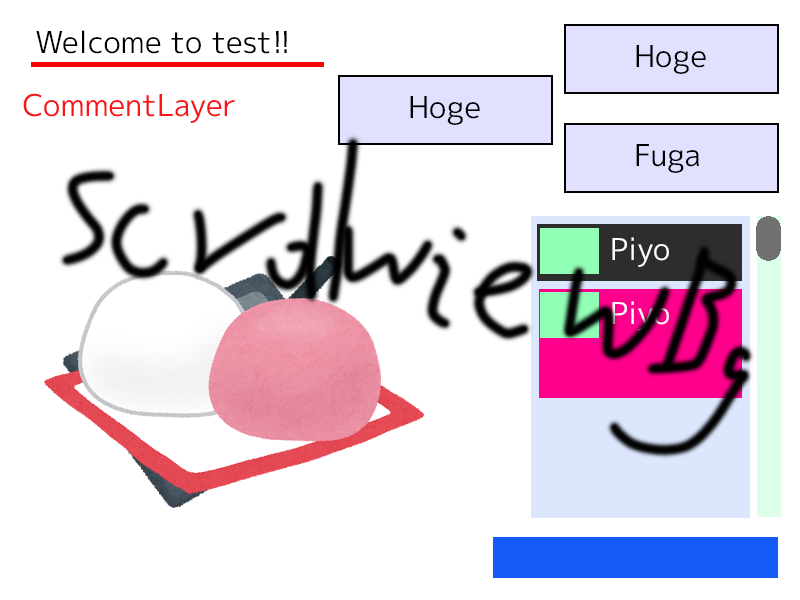
<style>
.page{position:relative;width:800px;height:600px;background:#ffffff}
.page>*{position:absolute;margin:0}
.t1{font:30px "mplus-2p-regular";color:#000000}
.t2{font:30px "mplus-2p-regular";color:#ffffff}
.t3{font:30px "mplus-2p-regular"}
</style>
<div class="page">
<p class="t1" style="left:36px;top:30px;width:251px;height:24px">Welcome to test!!</p>
<p class="t1" style="left:636px;top:45px;width:70px;height:29px">Hoge</p>
<p class="t1" style="left:410px;top:96px;width:70px;height:29px">Hoge</p>
<p class="t1" style="left:636px;top:144px;width:63px;height:29px">Fuga</p>
<p class="t2" style="left:612px;top:237px;width:57px;height:30px">Piyo</p>
<p class="t3" style="left:612px;top:301px;width:57px;height:30px">Piyo</p>
</div>
